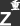
<style>
.page{position:relative;width:20px;height:26px;background:#333333}
.page>*{position:absolute;margin:0}
.t1{font:12px "DFKaiShu-SB-Estd-BF";color:#ffffff;font-weight:bold}
.t2{font:18px "ArialMT";color:#ffffff;font-weight:bold}
</style>
<div class="page">
<p class="t1" style="left:10px;top:0px;width:11px;height:11px">重</p>
<p class="t2" style="left:0px;top:12px;width:11px;height:14px">Z</p>
</div>
